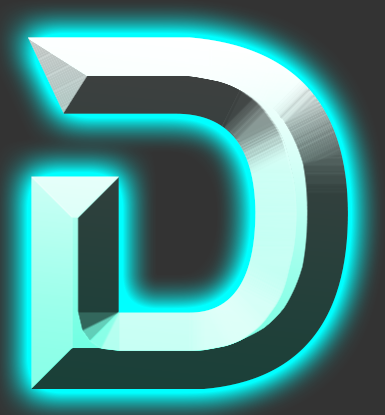
<style>
.page{position:relative;width:385px;height:415px}
.page>*{position:absolute;margin:0}
.t1{font:720px "ROBOTECHGP"}
</style>
<div class="page">
<p class="t1" style="left:28px;top:37px;width:320px;height:352px">D</p>
</div>
